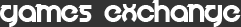
<style>
.page{position:relative;width:241px;height:27px;background:#333333}
.page>*{position:absolute;margin:0}
.t1{font:25px "Velocity";color:#ffffff}
</style>
<div class="page">
<p class="t1" style="left:0px;top:0px;width:241px;height:27px">Games Exchange</p>
</div>
